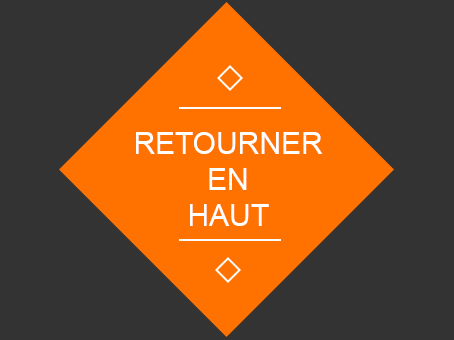
<style>
.page{position:relative;width:454px;height:340px;background:#333333}
.page>*{position:absolute;margin:0}
.t1{font:30px "ArialMT";color:#ffffff}
</style>
<div class="page">
<p class="t1" style="left:136px;top:132px;width:187px;height:94px;text-align:center">RETOURNER<br>EN<br>HAUT</p>
</div>
